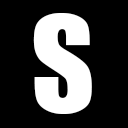
<style>
.page{position:relative;width:128px;height:128px;background:#000000}
.page>*{position:absolute;margin:0}
.t1{font:123.4px "Impact";letter-spacing:0.01em;color:#ffffff}
</style>
<div class="page">
<p class="t1" style="left:33px;top:13px;width:59px;height:101px">S</p>
</div>
